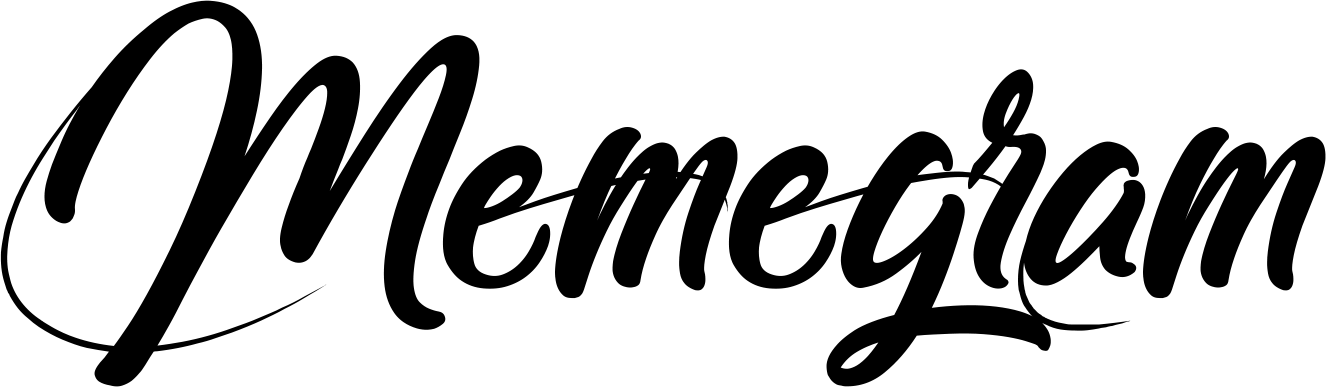
<style>
.page{position:relative;width:1326px;height:387px;background:#ffffff}
.page>*{position:absolute;margin:0}
.t1{font:375px "Follow-Me";color:#000000}
</style>
<div class="page">
<p class="t1" style="left:0px;top:0px;width:1326px;height:387px">Memegram</p>
</div>
